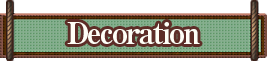
<style>
.page{position:relative;width:267px;height:61px;background:#ffffff}
.page>*{position:absolute;margin:0}
.t1{font:30px "RyuminPro-ExBold";letter-spacing:-0.08em;color:#fffff7}
</style>
<div class="page">
<p class="t1" style="left:67px;top:22px;width:133px;height:22px">Decoration</p>
</div>
